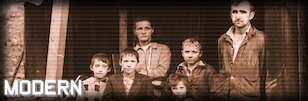
<style>
.page{position:relative;width:308px;height:101px}
.page>*{position:absolute;margin:0}
.t1{font:17.3px "ACES_MIL-STD-2161C";color:#ffffff}
</style>
<div class="page">
<p class="t1" style="left:4px;top:80px;width:78px;height:15px">modern</p>
</div>
